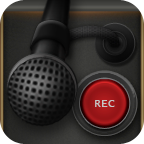
<style>
.page{position:relative;width:144px;height:144px}
.page>*{position:absolute;margin:0}
.t1{font:11.5px "LucidaConsole";color:#b3b2b2}
</style>
<div class="page">
<p class="t1" style="left:95px;top:100px;width:20px;height:7px">REC</p>
</div>
